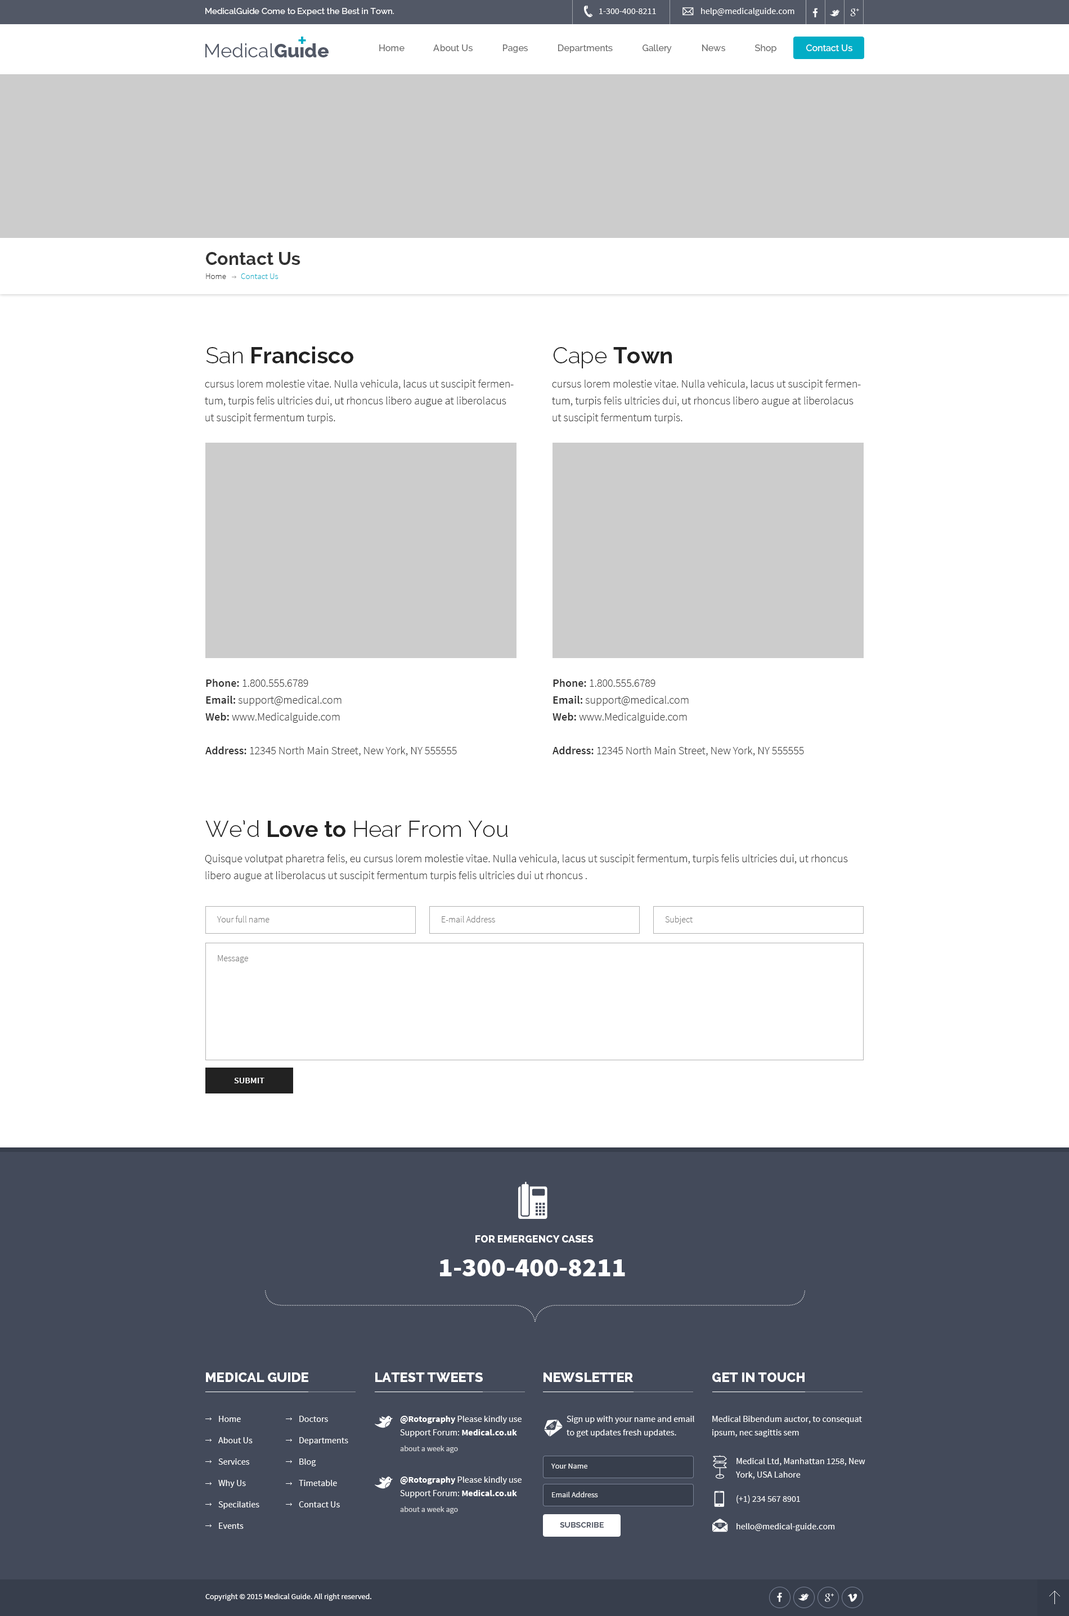
<style>
.page{position:relative;width:1069px;height:1616px;background:#ffffff}
.page>*{position:absolute;margin:0}
.t1{font:8.4px "Raleway-Medium";color:#ffffff}
.t2{font:9px "SourceSansPro-Regular";color:#ffffff}
.t3{font:11.4px "invent-communication";color:#ffffff}
.t4{font:9px "Raleway-Medium";color:#707070}
.t5{font:9px "Raleway-Medium";color:#ffffff}
.t6{font:18px "Raleway-Bold";color:#323232}
.t7{font:8.4px "SourceSansPro-Light";color:#333333}
.t8{font:8.4px "SourceSansPro-Light";color:#02adc6}
.t9{font:22.5px "Raleway-Bold";color:#222222}
.t10{font:22.5px "Raleway-Light";color:#222222}
.t11{font:11.2px/16.9px "SourceSansPro-Light";color:#333333}
.t12{font:11.2px/16.9px "SourceSansPro-Semibold";color:#333333}
.t13{font:9px "SourceSansPro-Light";color:#767676}
.t14{font:9px "SourceSansPro-Semibold";color:#ffffff;text-transform:uppercase}
.t15{font:39.5px "invent-communication";color:#ffffff}
.t16{font:10.1px "Raleway-ExtraBold";color:#ffffff;text-transform:uppercase}
.t17{font:27px "SourceSansPro-Black";color:#ffffff}
.t18{font:13.5px "Raleway-ExtraBold";color:#ffffff;text-transform:uppercase}
.t19{font:9px/21.4px "SourceSansPro-Regular";color:#ffffff}
.t20{font:9px/13.5px "SourceSansPro-Regular";color:#ffffff}
.t21{font:9px/13.5px "SourceSansPro-Bold";color:#ffffff}
.t22{font:7.9px "SourceSansPro-Regular";color:#d3d4d7}
.t23{font:7.9px "SourceSansPro-Regular";color:#ffffff}
.t24{font:7.9px "Raleway-Bold";color:#525866;text-transform:uppercase}
</style>
<div class="page">
<p class="t1" style="left:205px;top:8px;width:189px;height:8px">MedicalGuide Come to Expect the Best in Town.</p>
<p class="t2" style="left:599px;top:8px;width:57px;height:6px">1-300-400-8211</p>
<p class="t3" style="left:682px;top:7px;width:12px;height:8px">(</p>
<p class="t2" style="left:701px;top:8px;width:93px;height:8px">help@medicalguide.com</p>
<p class="t4" style="left:379px;top:44px;width:473px;height:9px">Home             About Us             Pages             Departments             Gallery             News             Shop             <span class="t5">Contact Us</span></p>
<p class="t6" style="left:206px;top:252px;width:94px;height:13px">Contact Us</p>
<p class="t7" style="left:206px;top:273px;width:20px;height:6px">Home</p>
<p class="t8" style="left:241px;top:273px;width:37px;height:6px">Contact Us</p>
<p class="t9" style="left:206px;top:346px;width:147px;height:17px"><span class="t10">San </span>Francisco</p>
<p class="t10" style="left:553px;top:347px;width:119px;height:21px">Cape <span class="t9">Town</span></p>
<p class="t11" style="left:205px;top:380px;width:309px;height:44px">cursus lorem molestie vitae. Nulla vehicula, lacus ut suscipit fermentum, turpis felis ultricies dui, ut rhoncus libero augue at liberolacus ut suscipit fermentum turpis.</p>
<p class="t11" style="left:552px;top:380px;width:309px;height:44px">cursus lorem molestie vitae. Nulla vehicula, lacus ut suscipit fermentum, turpis felis ultricies dui, ut rhoncus libero augue at liberolacus ut suscipit fermentum turpis.</p>
<p class="t11" style="left:205px;top:679px;width:252px;height:77px"><span class="t12">Phone: </span>1.800.555.6789<br><span class="t12">Email: </span>support@medical.com<br><span class="t12">Web:</span> www.Medicalguide.com<br><br><span class="t12">Address: </span>12345 North Main Street, New York, NY 555555</p>
<p class="t11" style="left:552px;top:679px;width:252px;height:77px"><span class="t12">Phone: </span>1.800.555.6789<br><span class="t12">Email: </span>support@medical.com<br><span class="t12">Web:</span> www.Medicalguide.com<br><br><span class="t12">Address: </span>12345 North Main Street, New York, NY 555555</p>
<p class="t10" style="left:205px;top:820px;width:303px;height:17px">We’d <span class="t9">Love to</span> Hear From You</p>
<p class="t11" style="left:205px;top:854px;width:643px;height:27px">Quisque volutpat pharetra felis, eu cursus lorem molestie vitae. Nulla vehicula, lacus ut suscipit fermentum, turpis felis ultricies dui, ut rhoncus libero augue at liberolacus ut suscipit fermentum turpis felis ultricies dui ut rhoncus .</p>
<p class="t13" style="left:217px;top:916px;width:52px;height:6px">Your full name</p>
<p class="t13" style="left:442px;top:916px;width:53px;height:6px">E-mail Address</p>
<p class="t13" style="left:665px;top:916px;width:27px;height:8px">Subject</p>
<p class="t13" style="left:218px;top:955px;width:30px;height:8px">Message</p>
<p class="t14" style="left:234px;top:1078px;width:30px;height:5px">submit</p>
<p class="t15" style="left:518px;top:1182px;width:29px;height:37px">0</p>
<p class="t16" style="left:475px;top:1235px;width:118px;height:8px">For emergency cases</p>
<p class="t17" style="left:440px;top:1259px;width:185px;height:17px">1-300-400-8211</p>
<p class="t18" style="left:206px;top:1372px;width:102px;height:10px">Medical guide</p>
<p class="t18" style="left:375px;top:1372px;width:108px;height:10px">LATEST TWEETS</p>
<p class="t18" style="left:543px;top:1372px;width:90px;height:10px">NEWSLETTER</p>
<p class="t18" style="left:712px;top:1372px;width:92px;height:10px">GET IN TOUCH</p>
<p class="t19" style="left:218px;top:1416px;width:41px;height:113px">Home<br>About Us<br>Services<br>Why Us<br>Specilaties<br>Events</p>
<p class="t19" style="left:299px;top:1416px;width:49px;height:92px">Doctors<br>Departments<br>Blog<br>Timetable<br>Contact Us</p>
<p class="t20" style="left:400px;top:1416px;width:121px;height:21px"><span class="t21">@Rotography</span> Please kindly use <br>Support Forum: <span class="t21">Medical.co.uk</span></p>
<p class="t20" style="left:566px;top:1416px;width:128px;height:21px">Sign up with your name and email<br>to get updates fresh updates.</p>
<p class="t20" style="left:712px;top:1416px;width:150px;height:21px">Medical Bibendum auctor, to consequat<br>ipsum, nec sagittis sem</p>
<p class="t22" style="left:400px;top:1446px;width:58px;height:7px">about a week ago</p>
<p class="t23" style="left:551px;top:1464px;width:36px;height:5px;opacity:0.9">Your Name</p>
<p class="t20" style="left:736px;top:1458px;width:129px;height:21px">Medical Ltd, Manhattan 1258, New<br>York, USA Lahore</p>
<p class="t20" style="left:400px;top:1477px;width:121px;height:21px"><span class="t21">@Rotography</span> Please kindly use <br>Support Forum: <span class="t21">Medical.co.uk</span></p>
<p class="t23" style="left:552px;top:1492px;width:46px;height:5px;opacity:0.9">Email Address</p>
<p class="t2" style="left:736px;top:1495px;width:64px;height:9px">(+1) 234 567 8901</p>
<p class="t22" style="left:400px;top:1506px;width:58px;height:8px">about a week ago</p>
<p class="t24" style="left:560px;top:1522px;width:44px;height:6px">subscribe</p>
<p class="t2" style="left:736px;top:1523px;width:99px;height:8px">hello@medical-guide.com</p>
<p class="t23" style="left:205px;top:1594px;width:166px;height:7px">Copyright © 2015 Medical Guide. All right reserved.</p>
</div>
